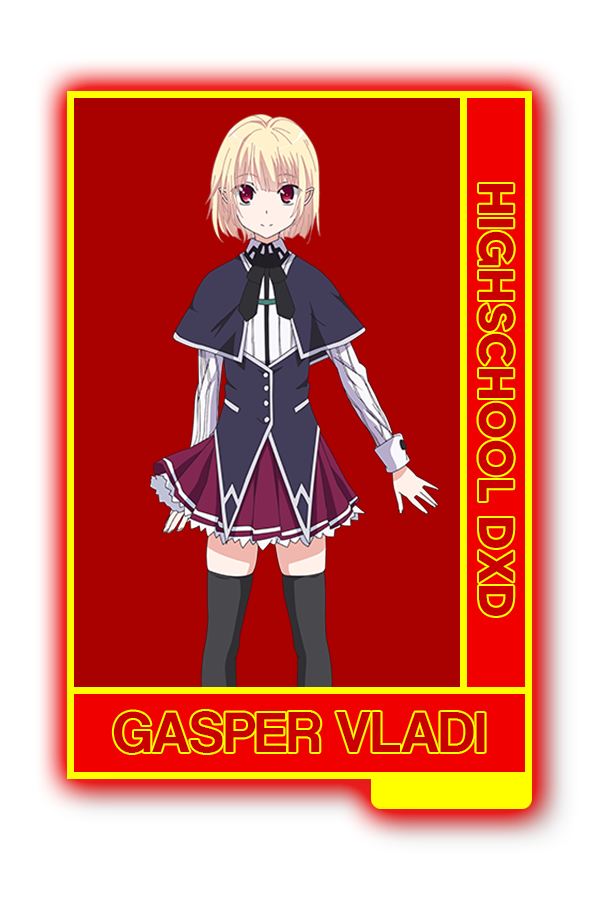
<style>
.page{position:relative;width:600px;height:900px;background:#a90000}
.page>*{position:absolute;margin:0}
.t1{font:48.8px "MADETOMMY-Bold";color:#ca0000}
.t2{font:59.4px "CoolveticaRg-Regular";color:#ca0000}
</style>
<div class="page">
<p class="t1" style="left:478px;top:184px;width:36px;height:432px;rotate:90deg">HIGHSCHOOL DXD</p>
<p class="t2" style="left:113px;top:711px;width:372px;height:42px">GASPER VLADI</p>
</div>
